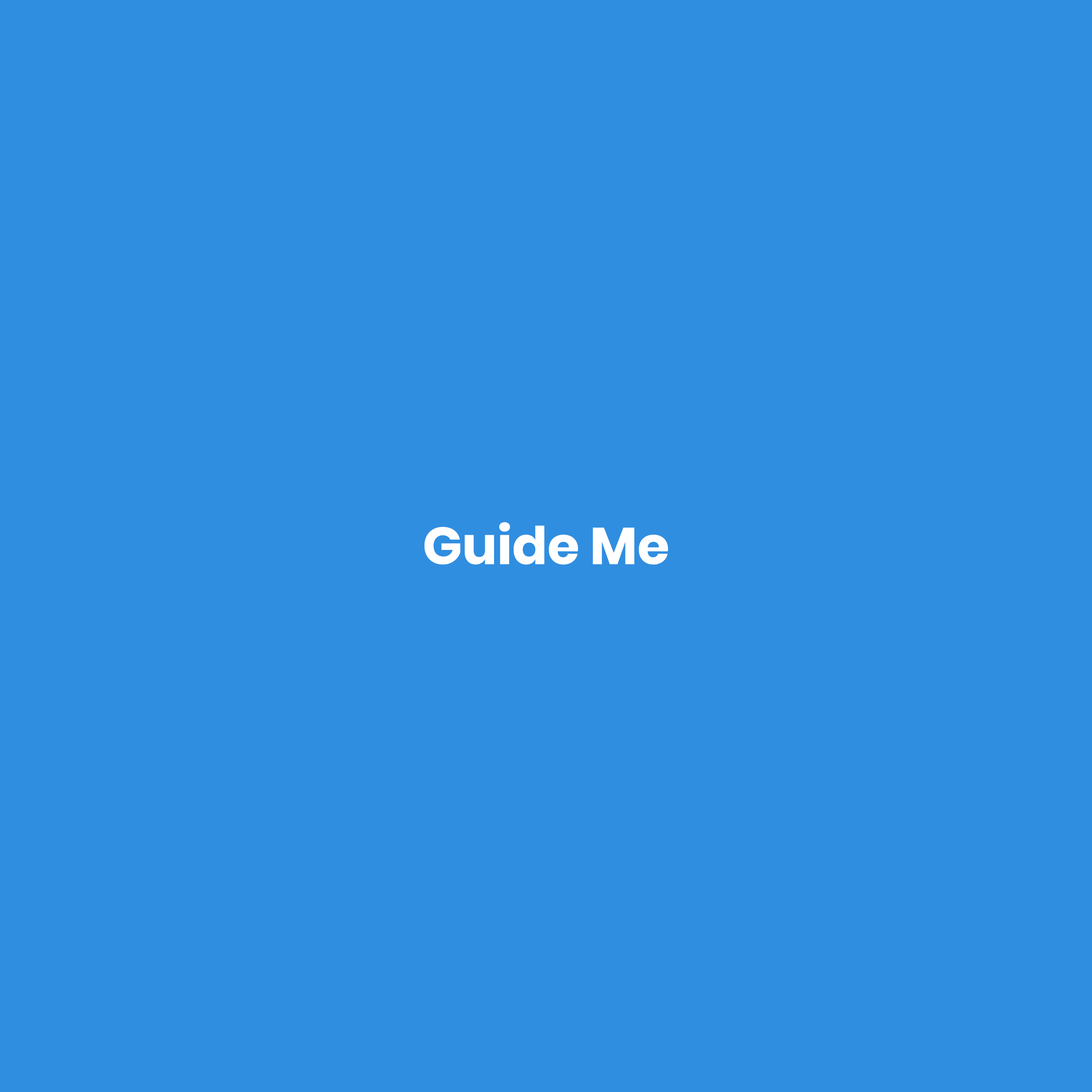
<style>
.page{position:relative;width:1092px;height:1092px;background:#308ee0}
.page>*{position:absolute;margin:0}
.t1{font:52px "Poppins-Bold";color:#ffffff}
</style>
<div class="page">
<p class="t1" style="left:424px;top:522px;width:244px;height:43px">Guide Me</p>
</div>
